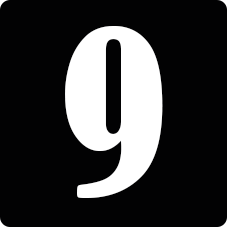
<style>
.page{position:relative;width:227px;height:227px;background:#020203}
.page>*{position:absolute;margin:0}
.t1{font:216px "BernardMT-Condensed";color:#ffffff}
</style>
<div class="page">
<p class="t1" style="left:65px;top:26px;width:98px;height:172px">9</p>
</div>
